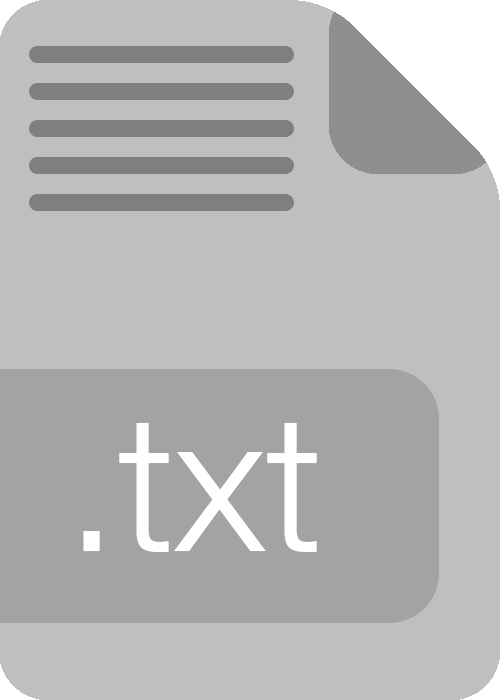
<style>
.page{position:relative;width:500px;height:700px;background:#bfbfbf}
.page>*{position:absolute;margin:0}
.t1{font:190.9px "HelveticaNeue-Light";color:#ffffff}
</style>
<div class="page">
<p class="t1" style="left:83px;top:423px;width:234px;height:129px">.txt</p>
</div>
